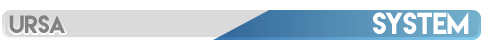
<style>
.page{position:relative;width:500px;height:44px;background:#ffffff}
.page>*{position:absolute;margin:0}
.t1{font:22.4px "LemonMilk";letter-spacing:-0.02em;color:#7b7b7b}
.t2{font:27.1px "LemonMilk";letter-spacing:-0.02em;color:#ffffff}
</style>
<div class="page">
<p class="t1" style="left:9px;top:15px;width:56px;height:18px">URSA</p>
<p class="t2" style="left:373px;top:12px;width:96px;height:22px">System</p>
</div>
